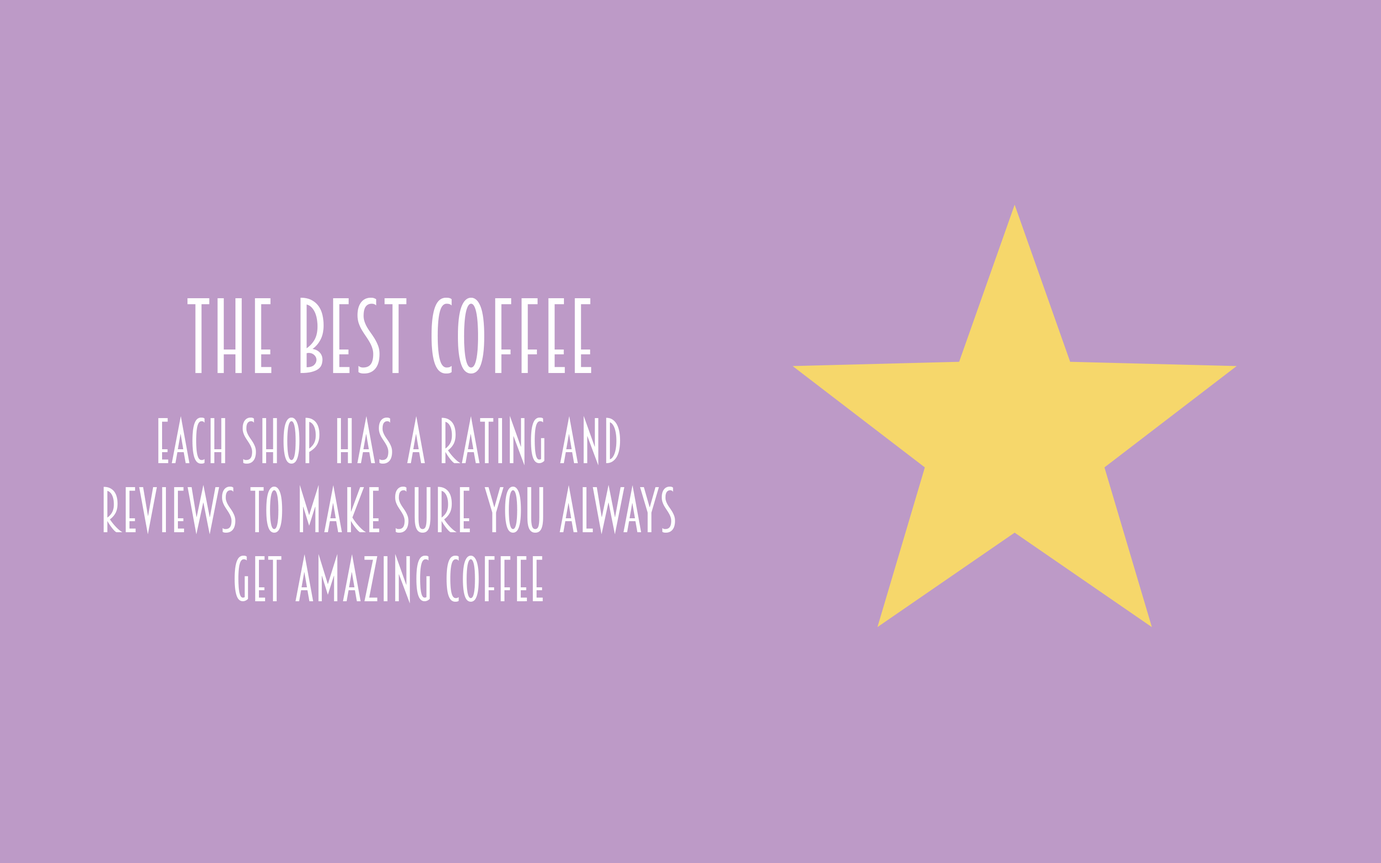
<style>
.page{position:relative;width:1381px;height:863px;background:#bd9ac7}
.page>*{position:absolute;margin:0}
.t1{font:95.9px "Breamcatcher-Regular";color:#ffffff}
.t2{font:57.6px "Breamcatcher-Regular";color:#ffffff}
</style>
<div class="page">
<p class="t1" style="left:188px;top:298px;width:403px;height:76px">the best coffee</p>
<p class="t2" style="left:104px;top:416px;width:571px;height:188px;text-align:center">each shop has a rating and<br>reviews to make sure you always<br>get amazing coffee</p>
</div>
